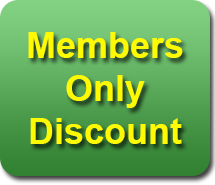
<style>
.page{position:relative;width:215px;height:185px}
.page>*{position:absolute;margin:0}
.t1{font:36px "Arial-BoldMT";color:#fdfa02}
</style>
<div class="page">
<p class="t1" style="left:28px;top:32px;width:155px;height:112px;text-align:center">Members<br>Only<br>Discount</p>
</div>
